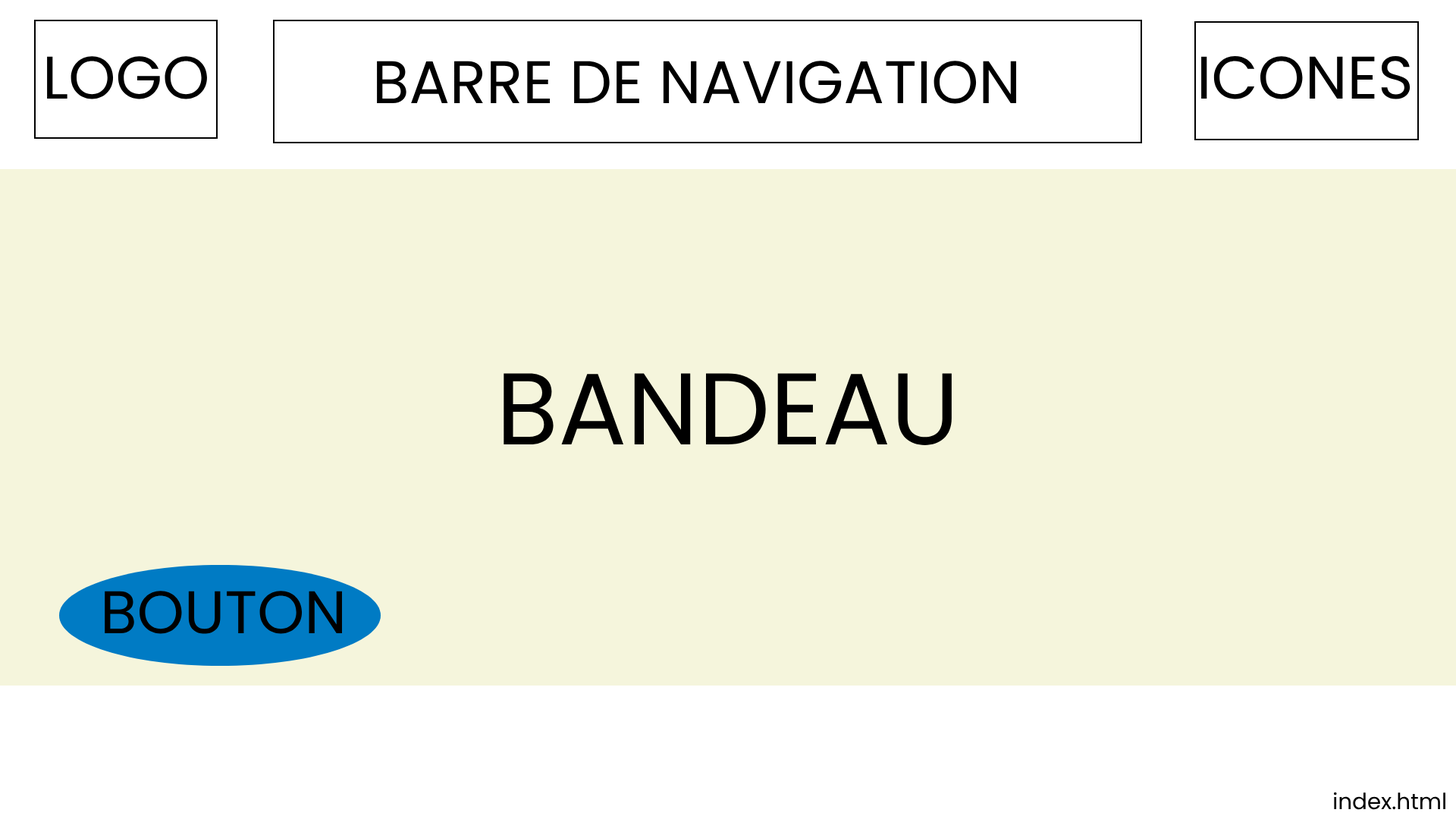
<style>
.page{position:relative;width:1456px;height:819px;background:#f5f5dc}
.page>*{position:absolute;margin:0}
.t1{font:60.1px "Poppins-Regular";color:#000000}
.t2{font:101.6px "Poppins-Regular";color:#000000}
.t3{font:22.2px "Poppins-Regular";color:#000000}
</style>
<div class="page">
<p class="t1" style="left:47px;top:56px;width:160px;height:43px">LOGO</p>
<p class="t1" style="left:377px;top:61px;width:639px;height:43px">BARRE DE NAVIGATION</p>
<p class="t1" style="left:1201px;top:56px;width:209px;height:43px">ICONES</p>
<p class="t2" style="left:504px;top:373px;width:448px;height:72px">BANDEAU</p>
<p class="t1" style="left:105px;top:591px;width:237px;height:43px">BOUTON</p>
<p class="t3" style="left:1334px;top:792px;width:111px;height:18px">index.html</p>
</div>
